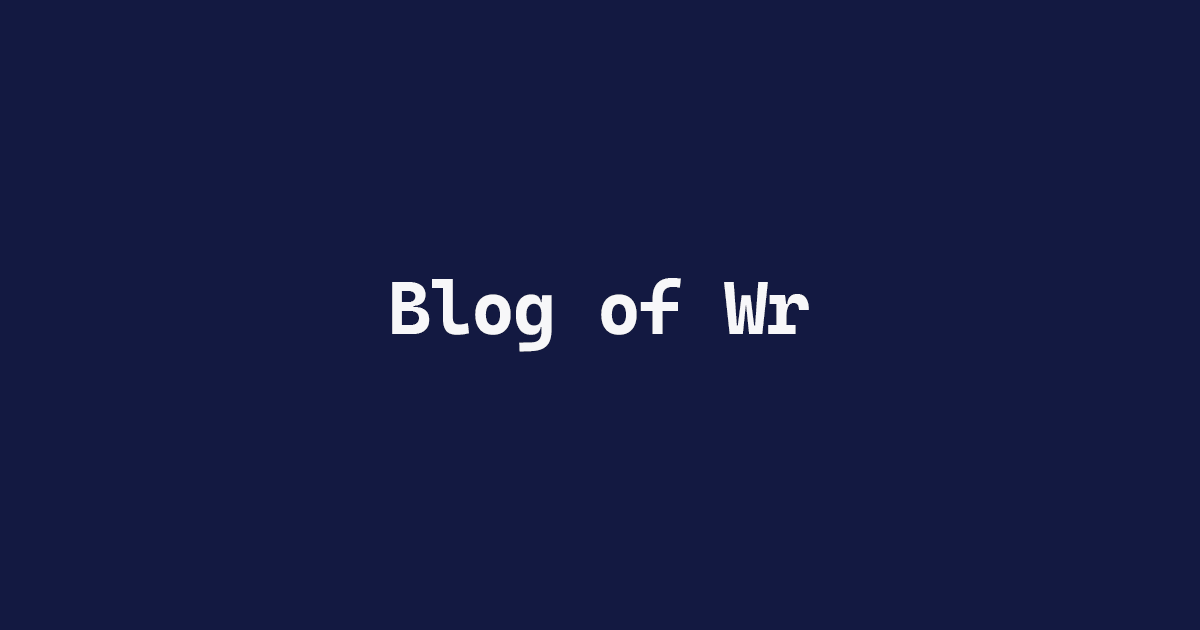
<style>
.page{position:relative;width:1200px;height:630px;background:#131941}
.page>*{position:absolute;margin:0}
.t1{font:75px "CascadiaMonoRoman-Bold";letter-spacing:-0.025em;color:#f7f7f9}
</style>
<div class="page">
<p class="t1" style="left:392px;top:278px;width:417px;height:74px">Blog of Wr</p>
</div>
